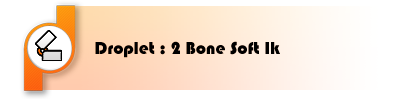
<style>
.page{position:relative;width:400px;height:100px;background:#ffffff}
.page>*{position:absolute;margin:0}
.t1{font:18px "Bauhaus93";color:#000000}
</style>
<div class="page">
<p class="t1" style="left:95px;top:41px;width:185px;height:17px">Droplet : 2 Bone Soft Ik</p>
</div>
